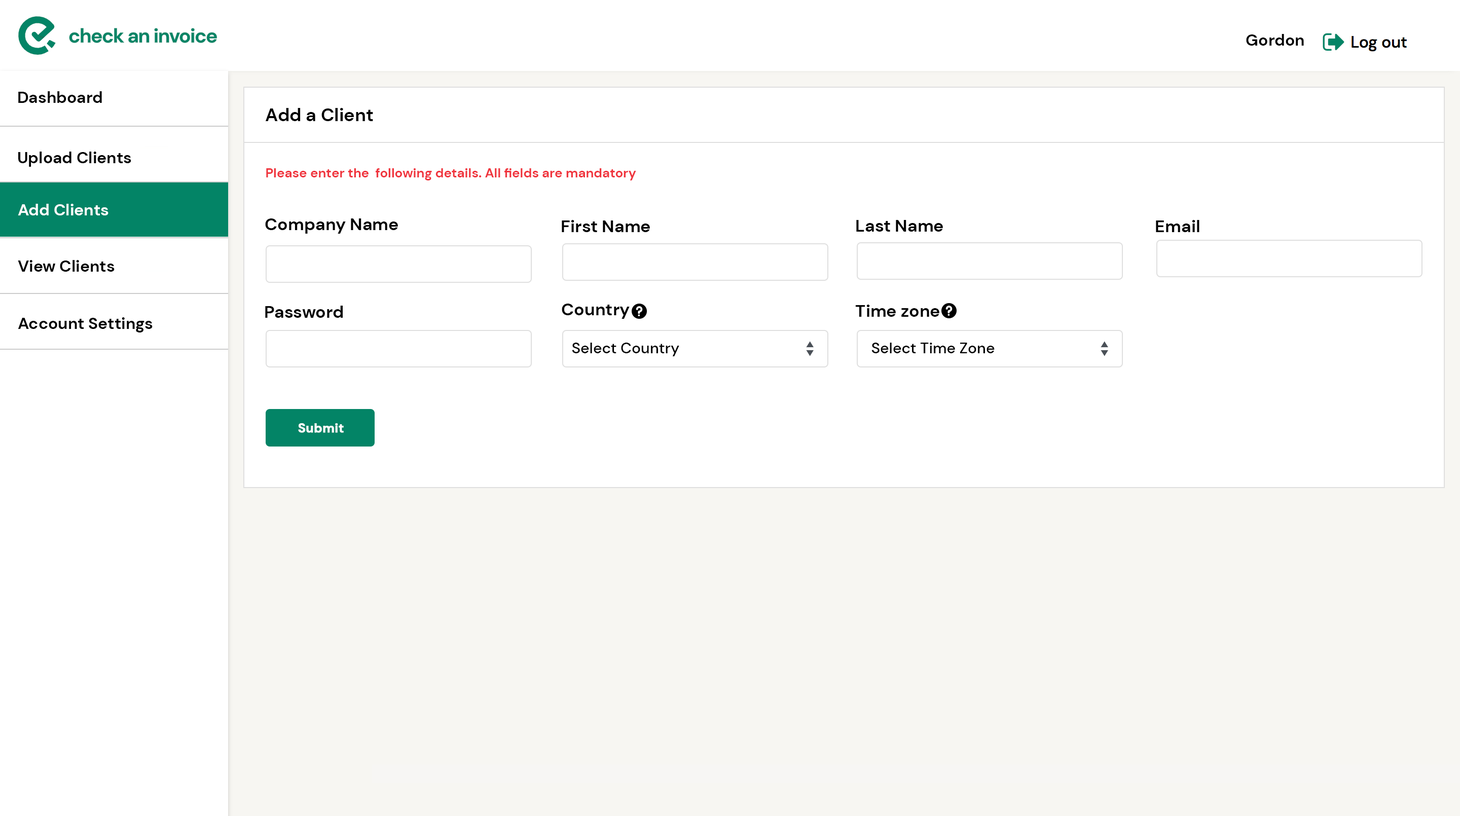
<style>
.page{position:relative;width:1460px;height:816px;background:#ffffff}
.page>*{position:absolute;margin:0}
.t1{font:16.2px "DMSans-Bold";color:#000000}
.t2{font:18.3px "DMSans-Bold";color:#010101}
.t3{font:13.2px "DMSans-Bold";color:#f0353e}
.t4{font:16.2px "DMSans-Bold";color:#ffffff}
.t5{font:17.2px "DMSans-Bold";color:#000000}
.t6{font:15.2px "DMSans-Medium";color:#000000}
.t7{font:12.7px "DMSans-Bold";color:#ffffff;font-weight:bold}
</style>
<div class="page">
<p class="t1" style="left:1246px;top:34px;width:58px;height:12px">Gordon</p>
<p class="t1" style="left:18px;top:91px;width:84px;height:12px">Dashboard</p>
<p class="t2" style="left:265px;top:108px;width:108px;height:13px">Add a Client</p>
<p class="t1" style="left:18px;top:152px;width:113px;height:15px">Upload Clients</p>
<p class="t3" style="left:266px;top:168px;width:370px;height:13px">Please enter the  following details. All fields are mandatory</p>
<p class="t4" style="left:18px;top:204px;width:91px;height:12px">Add Clients</p>
<p class="t5" style="left:265px;top:219px;width:133px;height:15px">Company Name</p>
<p class="t5" style="left:562px;top:220px;width:88px;height:12px">First Name</p>
<p class="t5" style="left:857px;top:220px;width:86px;height:12px">Last Name</p>
<p class="t5" style="left:1156px;top:220px;width:44px;height:12px">Email</p>
<p class="t1" style="left:18px;top:260px;width:97px;height:12px">View Clients</p>
<p class="t5" style="left:265px;top:306px;width:78px;height:12px">Password</p>
<p class="t5" style="left:562px;top:304px;width:68px;height:15px">Country</p>
<p class="t5" style="left:856px;top:305px;width:84px;height:12px">Time zone</p>
<p class="t1" style="left:18px;top:317px;width:135px;height:16px">Account Settings</p>
<p class="t6" style="left:572px;top:343px;width:108px;height:14px">Select Country</p>
<p class="t6" style="left:872px;top:343px;width:123px;height:10px">Select Time Zone</p>
<p class="t7" style="left:298px;top:423px;width:46px;height:10px">Submit</p>
</div>
